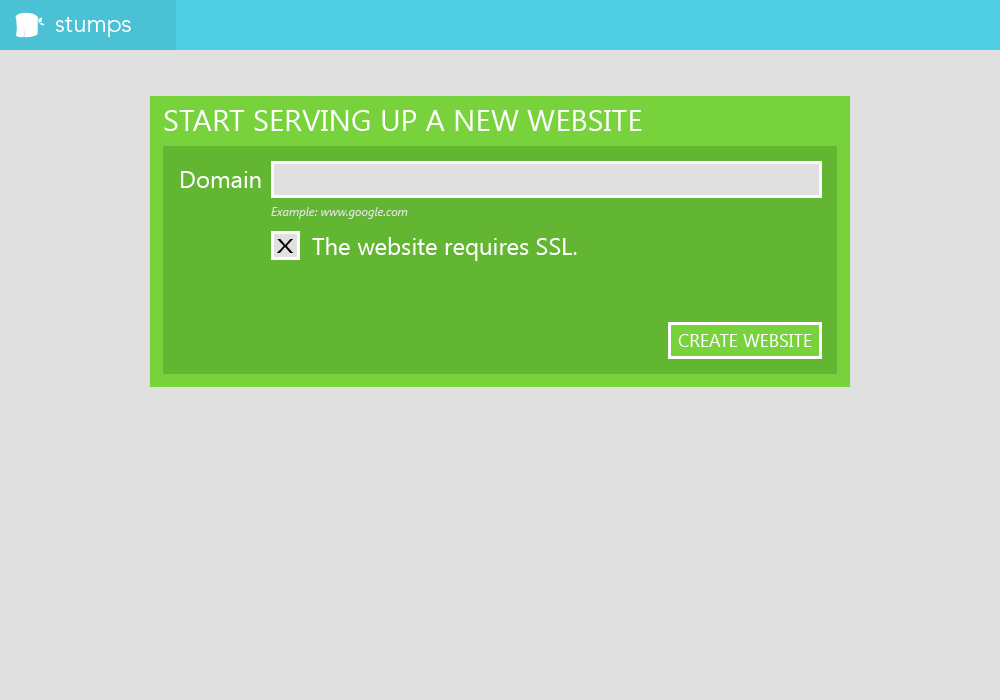
<style>
.page{position:relative;width:1000px;height:700px;background:#e0e0e0}
.page>*{position:absolute;margin:0}
.t1{font:24px "Avenir-Light";color:#ffffff}
.t2{font:30px "SegoeUI";color:#ffffff}
.t3{font:24px "SegoeUI";color:#ffffff}
.t4{font:12px "SegoeUI-Italic";color:#e0e0e0}
.t5{font:20.4px "SegoeUI";color:#000000;scale:1.44 1}
.t6{font:18px "SegoeUI";color:#ffffff}
</style>
<div class="page">
<p class="t1" style="left:55px;top:16px;width:76px;height:21px">stumps</p>
<p class="t2" style="left:164px;top:110px;width:478px;height:21px">START SERVING UP A NEW WEBSITE</p>
<p class="t3" style="left:181px;top:171px;width:80px;height:17px">Domain</p>
<p class="t4" style="left:271px;top:207px;width:137px;height:12px">Example: www.google.com</p>
<p class="t5" style="left:277px;top:239px;width:16px;height:14px">X</p>
<p class="t3" style="left:312px;top:237px;width:265px;height:24px">The website requires SSL.</p>
<p class="t6" style="left:678px;top:334px;width:134px;height:13px">CREATE WEBSITE</p>
</div>
